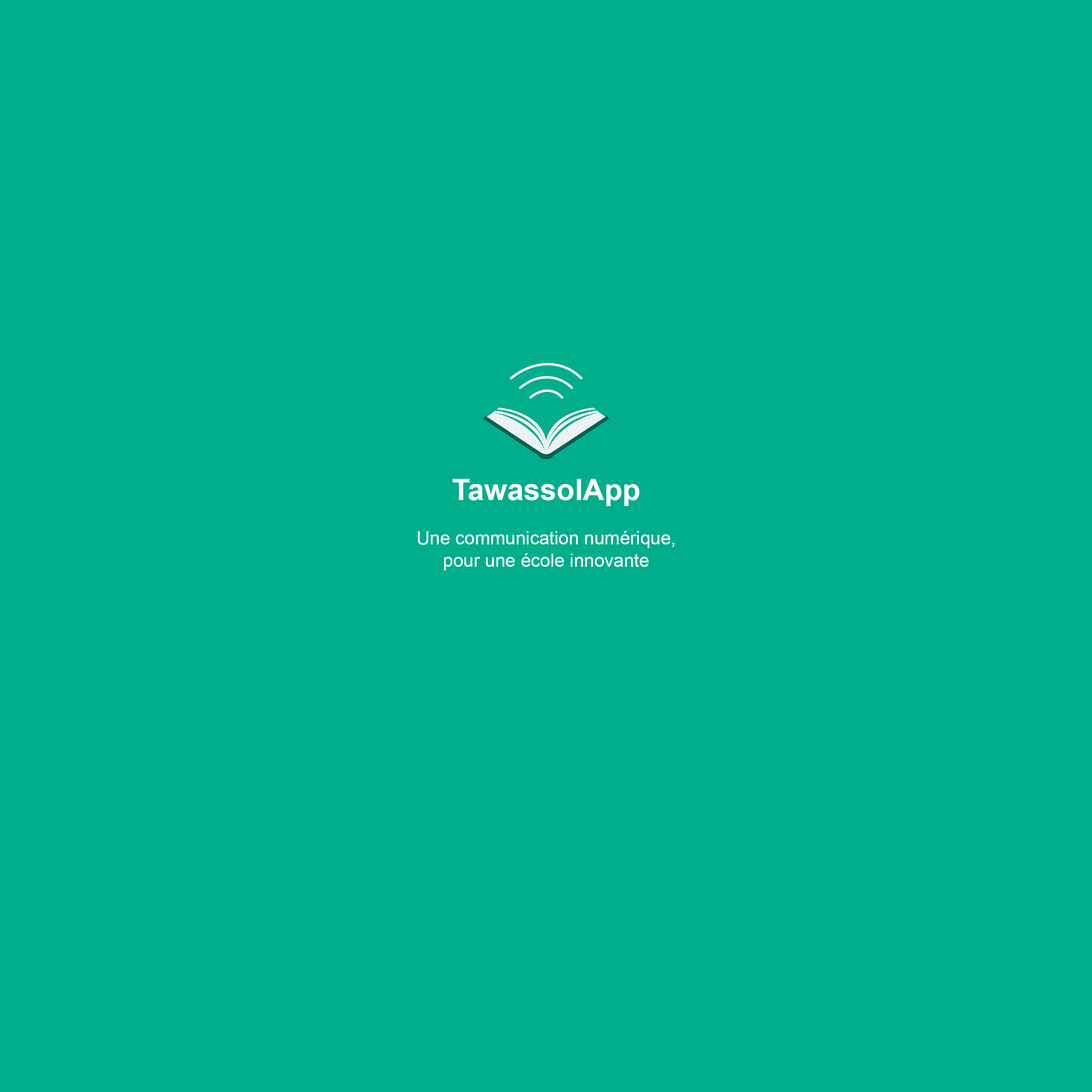
<style>
.page{position:relative;width:1092px;height:1092px;background:#01ae8c}
.page>*{position:absolute;margin:0}
.t1{font:29.6px "Arial-BoldMT";color:#ffffff}
.t2{font:18.4px "ArialMT";color:#ffffff}
</style>
<div class="page">
<p class="t1" style="left:452px;top:479px;width:188px;height:27px">TawassolApp</p>
<p class="t2" style="left:418px;top:531px;width:256px;height:39px;text-align:center">Une communication numérique,<br>pour une école innovante</p>
</div>
